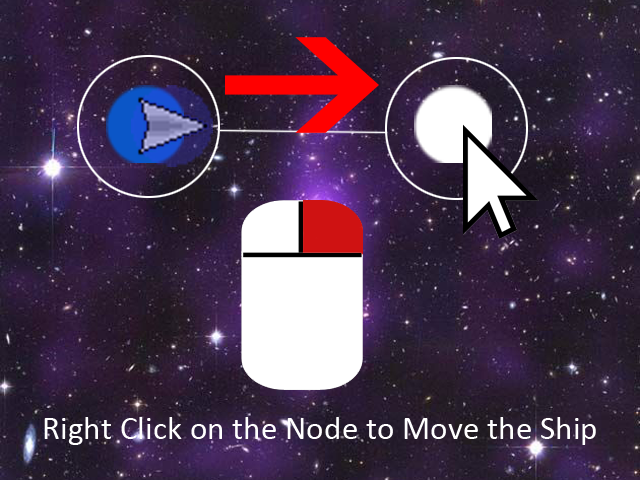
<style>
.page{position:relative;width:640px;height:480px}
.page>*{position:absolute;margin:0}
.t1{font:33.3px "Calibri";color:#ffffff}
</style>
<div class="page">
<p class="t1" style="left:44px;top:417px;width:552px;height:28px">Right Click on the Node to Move the Ship</p>
</div>
